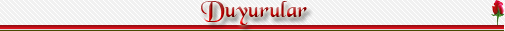
<style>
.page{position:relative;width:505px;height:31px;background:#f1f1f1}
.page>*{position:absolute;margin:0}
.t1{font:24px "Black-Regular"}
</style>
<div class="page">
<p class="t1" style="left:201px;top:1px;width:106px;height:24px">Duyurular</p>
</div>
